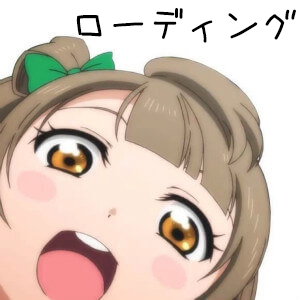
<style>
.page{position:relative;width:300px;height:300px;background:#ffffff}
.page>*{position:absolute;margin:0}
.t1{font:38px "aquafont";color:#000000}
</style>
<div class="page">
<p class="t1" style="left:76px;top:8px;width:220px;height:35px">ローディング</p>
</div>
